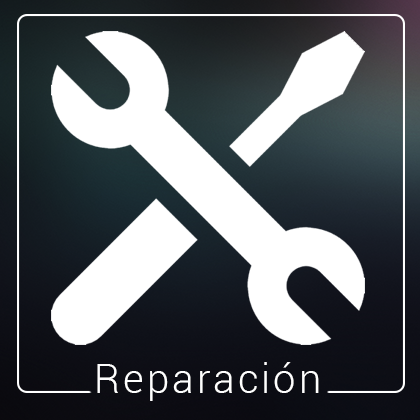
<style>
.page{position:relative;width:420px;height:420px;background:#ffffff}
.page>*{position:absolute;margin:0}
.t1{font:40.1px "Roboto-Light";letter-spacing:0.075em;color:#ffffff}
</style>
<div class="page">
<p class="t1" style="left:97px;top:362px;width:222px;height:39px">Reparación</p>
</div>
